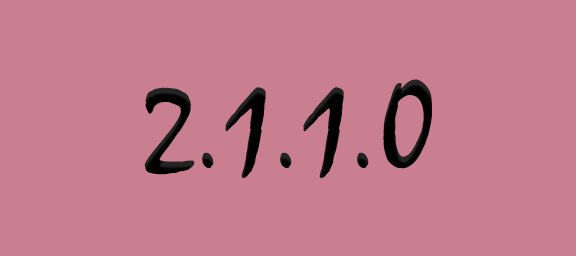
<style>
.page{position:relative;width:576px;height:256px;background:#c97f8f}
.page>*{position:absolute;margin:0}
.t1{font:128px "Mistral";color:#000000}
</style>
<div class="page">
<p class="t1" style="left:144px;top:79px;width:288px;height:99px">2.1.1.0</p>
</div>
